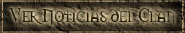
<style>
.page{position:relative;width:185px;height:33px}
.page>*{position:absolute;margin:0}
.t1{font:18px "Morpheus"}
</style>
<div class="page">
<p class="t1" style="left:9px;top:8px;width:167px;height:18px">Ver Noticias del Clan</p>
</div>
